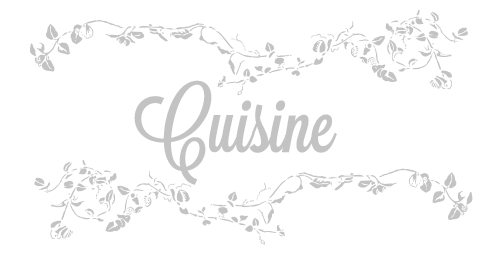
<style>
.page{position:relative;width:502px;height:259px;background:#ffffff}
.page>*{position:absolute;margin:0}
.t1{font:80px "Lavanderia-Sturdy";letter-spacing:-0.01em;color:#c3c3c3}
</style>
<div class="page">
<p class="t1" style="left:134px;top:80px;width:203px;height:105px">Cuisine</p>
</div>
